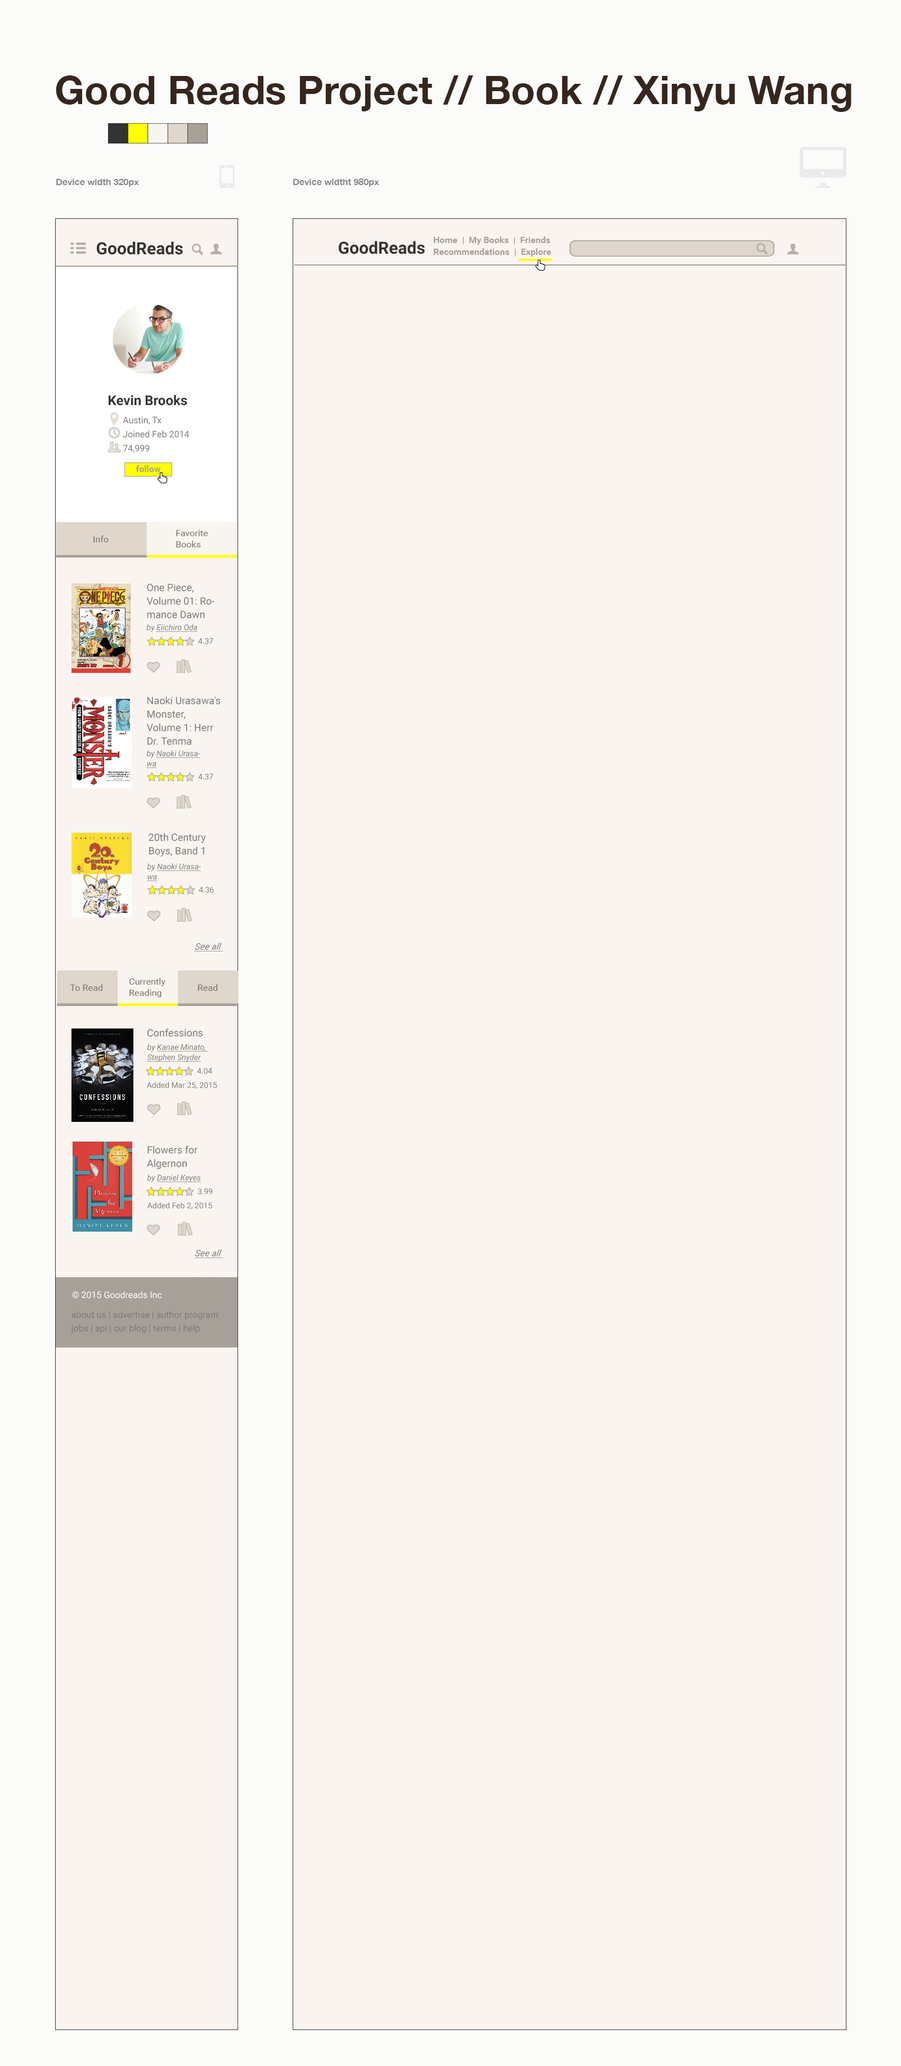
<style>
.page{position:relative;width:901px;height:2066px;background:#f9f4f0}
.page>*{position:absolute;margin:0}
.t1{font:39.4px "HelveticaNeue-Bold";color:#35271e}
.t2{font:9px "HelveticaNeue-Bold";color:#878787}
.t3{font:16.9px "Roboto-Bold";color:#333333}
.t4{font:13.5px "Roboto-Bold";color:#333333}
.t5{font:9px/14.1px "Roboto-Regular";color:#7d7973}
.t6{font:10.1px/13.5px "Roboto-Regular";color:#7d7973}
.t7{font:7.9px "Roboto-Italic";color:#7d7973;text-decoration:underline}
.t8{font:7.9px "Roboto-Italic";color:#7d7973}
.t9{font:7.9px "Roboto-Regular";color:#7d7973}
.t10{font:7.9px/10.1px "Roboto-Italic";color:#7d7973;text-decoration:underline}
.t11{font:7.9px/10.1px "Roboto-Italic";color:#7d7973}
.t12{font:9px "Roboto-Italic";color:#7d7973;font-style:italic;text-decoration:underline}
.t13{font:10.1px "Roboto-Regular";color:#7d7973}
.t14{font:9px "Roboto-Regular";color:#fcfcfb}
.t15{font:9px/13.5px "Roboto-Regular";color:#7d7973}
</style>
<div class="page">
<p class="t1" style="left:56px;top:75px;width:795px;height:37px">Good Reads Project // Book // Xinyu Wang</p>
<p class="t2" style="left:56px;top:179px;width:83px;height:8px">Device width 320px</p>
<p class="t2" style="left:293px;top:178px;width:86px;height:9px">Device widtht 980px</p>
<p class="t3" style="left:97px;top:241px;width:86px;height:14px">GoodReads</p>
<p class="t3" style="left:339px;top:241px;width:86px;height:13px">GoodReads</p>
<p class="t4" style="left:109px;top:395px;width:78px;height:11px">Kevin Brooks</p>
<p class="t5" style="left:123px;top:416px;width:66px;height:37px">Austin, Tx<br>Joined Feb 2014<br>74,999</p>
<p class="t6" style="left:146px;top:583px;width:68px;height:35px">One Piece, Volume 01: Romance Dawn</p>
<p class="t7" style="left:146px;top:624px;width:52px;height:8px"><span class="t8">by </span>Eiichiro Oda</p>
<p class="t9" style="left:198px;top:638px;width:15px;height:6px">4.37</p>
<p class="t6" style="left:146px;top:696px;width:74px;height:49px">Naoki Urasawa's Monster, Volume 1: Herr Dr. Tenma</p>
<p class="t10" style="left:146px;top:750px;width:54px;height:18px"><span class="t11">by </span>Naoki Urasawa</p>
<p class="t9" style="left:198px;top:773px;width:15px;height:7px">4.37</p>
<p class="t6" style="left:148px;top:833px;width:58px;height:24px">20th Century Boys, Band 1</p>
<p class="t10" style="left:147px;top:863px;width:54px;height:18px"><span class="t11">by </span>Naoki Urasawa</p>
<p class="t9" style="left:199px;top:886px;width:15px;height:7px">4.36</p>
<p class="t12" style="left:194px;top:942px;width:29px;height:9px">See all</p>
<p class="t13" style="left:147px;top:1028px;width:55px;height:9px">Confessions</p>
<p class="t10" style="left:147px;top:1043px;width:61px;height:18px"><span class="t11">by </span>Kanae Minato, <br>Stephen Snyder</p>
<p class="t9" style="left:197px;top:1068px;width:15px;height:6px">4.04</p>
<p class="t9" style="left:147px;top:1082px;width:70px;height:7px">Added Mar 25, 2015</p>
<p class="t6" style="left:147px;top:1145px;width:50px;height:24px">Flowers for <br>Algernon</p>
<p class="t7" style="left:147px;top:1174px;width:54px;height:8px"><span class="t8">by </span>Daniel Keyes</p>
<p class="t9" style="left:197px;top:1188px;width:16px;height:6px">3.99</p>
<p class="t9" style="left:147px;top:1202px;width:65px;height:7px">Added Feb 2, 2015</p>
<p class="t12" style="left:194px;top:1249px;width:29px;height:9px">See all</p>
<p class="t14" style="left:72px;top:1291px;width:90px;height:7px">© 2015 Goodreads Inc</p>
<p class="t15" style="left:71px;top:1311px;width:147px;height:22px">about us | advertise | author program <br>jobs | api | our blog | terms | help</p>
</div>
